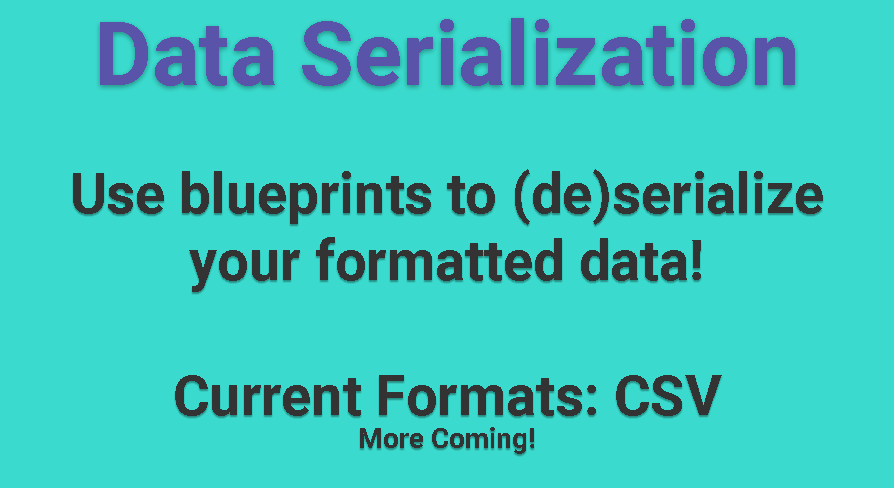
<style>
.page{position:relative;width:894px;height:488px;background:#3adbce}
.page>*{position:absolute;margin:0}
.t1{font:89px "Roboto-Bold";color:#5953aa}
.t2{font:56px "Roboto-Bold";color:#333333}
.t3{font:28px "Roboto-Bold";color:#333333}
</style>
<div class="page">
<p class="t1" style="left:100px;top:18px;width:695px;height:68px">Data Serialization</p>
<p class="t2" style="left:73px;top:169px;width:750px;height:285px;text-align:center">Use blueprints to (de)serialize<br>your formatted data!<br><br>Current Formats: CSV<br><span class="t3">More Coming!</span></p>
</div>
